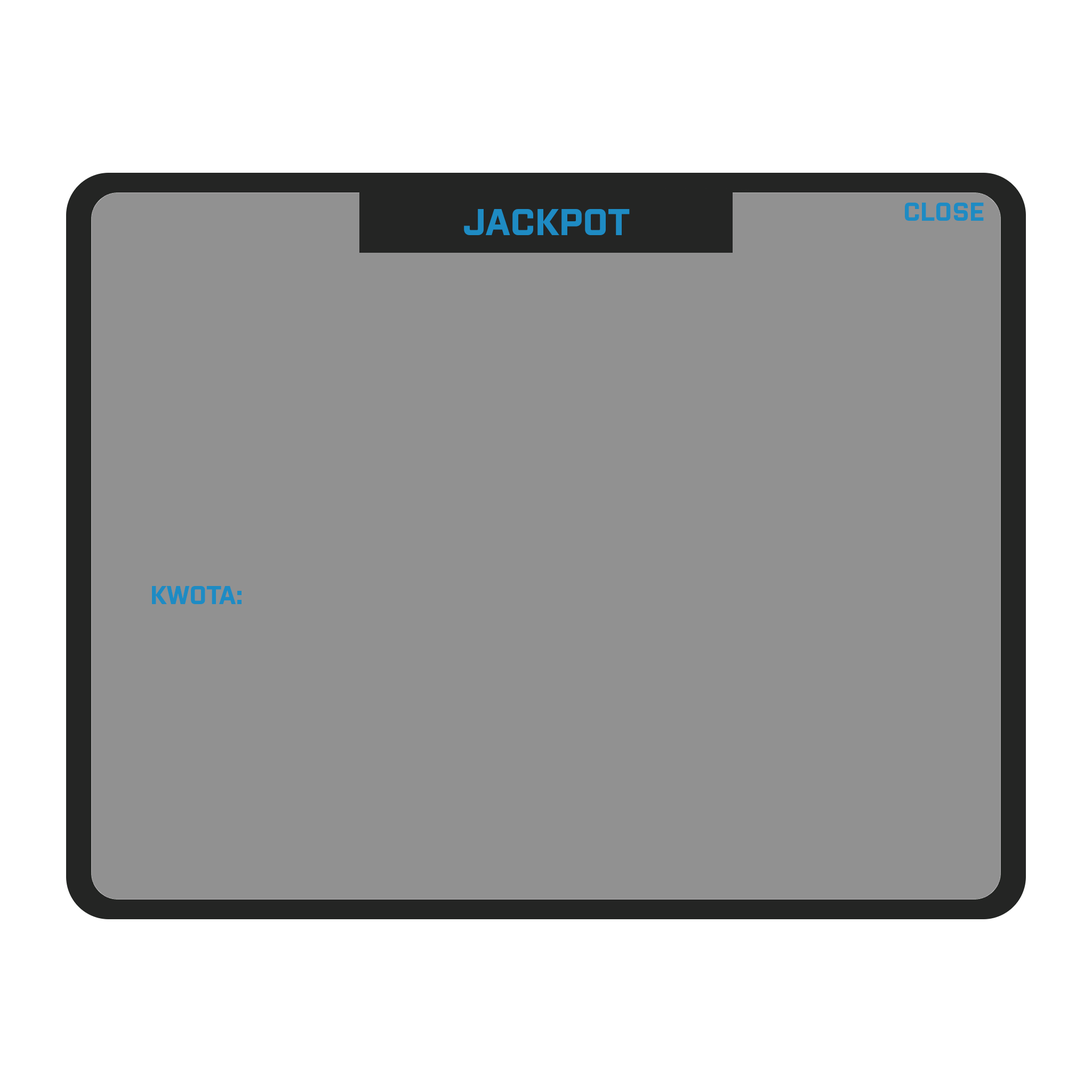
<style>
.page{position:relative;width:1092px;height:1092px;background:#919191}
.page>*{position:absolute;margin:0}
.t1{font:37.3px "Purista-Bold";color:#1e8bc3}
.t2{font:25.6px "Purista-Bold";color:#1e8bc3}
</style>
<div class="page">
<p class="t1" style="left:464px;top:209px;width:166px;height:26px">JACKPOT</p>
<p class="t2" style="left:905px;top:203px;width:79px;height:18px">CLOSE</p>
<p class="t2" style="left:152px;top:586px;width:90px;height:18px">KWOTA:</p>
</div>
